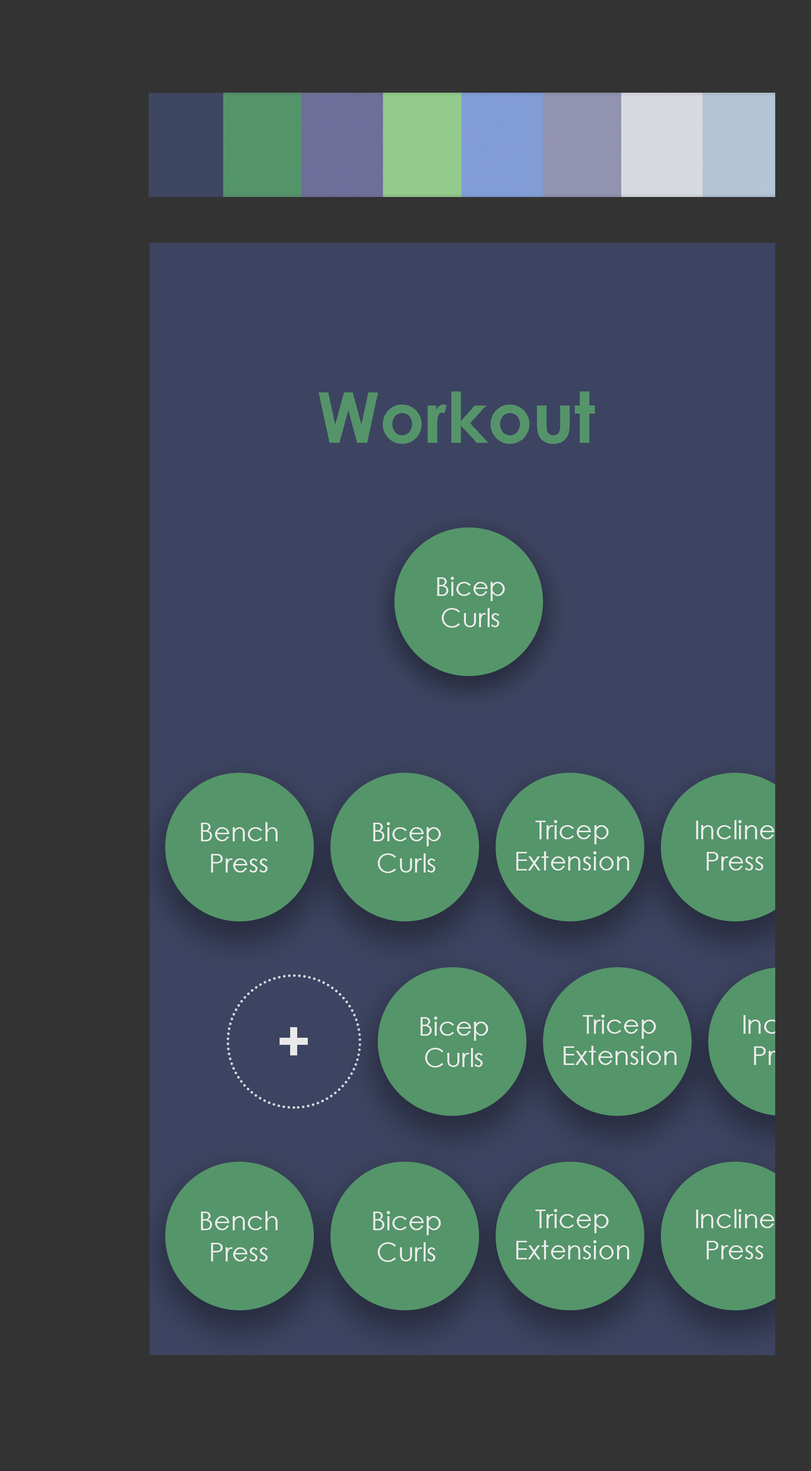
<style>
.page{position:relative;width:811px;height:1471px;background:#333333}
.page>*{position:absolute;margin:0}
.t1{font:70px "CenturyGothic-Bold";color:#55946a}
.t2{font:26.2px "CenturyGothic";color:#e9e9e9}
.t3{font:57.9px "CenturyGothic-Bold";color:#e9e9e9}
</style>
<div class="page">
<p class="t1" style="left:319px;top:391px;width:276px;height:53px">Workout</p>
<p class="t2" style="left:437px;top:577px;width:68px;height:51px;text-align:center">Bicep<br>Curls</p>
<p class="t2" style="left:201px;top:822px;width:77px;height:50px;text-align:center">Bench<br>Press</p>
<p class="t2" style="left:373px;top:822px;width:68px;height:51px;text-align:center">Bicep<br>Curls</p>
<p class="t2" style="left:516px;top:820px;width:113px;height:50px;text-align:center">Tricep<br>Extension</p>
<p class="t2" style="left:696px;top:820px;width:78px;height:50px;text-align:center">Incline<br>Press</p>
<p class="t2" style="left:421px;top:1016px;width:67px;height:51px;text-align:center">Bicep<br>Curls</p>
<p class="t2" style="left:564px;top:1014px;width:112px;height:51px;text-align:center">Tricep<br>Extension</p>
<p class="t3" style="left:280px;top:1027px;width:28px;height:28px">+</p>
<p class="t2" style="left:201px;top:1211px;width:77px;height:50px;text-align:center">Bench<br>Press</p>
<p class="t2" style="left:373px;top:1211px;width:68px;height:51px;text-align:center">Bicep<br>Curls</p>
<p class="t2" style="left:516px;top:1209px;width:113px;height:50px;text-align:center">Tricep<br>Extension</p>
<p class="t2" style="left:696px;top:1209px;width:78px;height:50px;text-align:center">Incline<br>Press</p>
</div>
